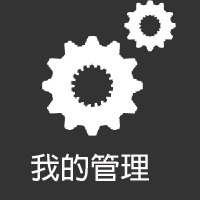
<style>
.page{position:relative;width:200px;height:200px;background:#333333}
.page>*{position:absolute;margin:0}
.t1{font:30px "AdobeFanHeitiStd-Bold";color:#fcf9f9}
</style>
<div class="page">
<p class="t1" style="left:31px;top:153px;width:118px;height:29px">我的管理</p>
</div>
